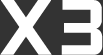
<style>
.page{position:relative;width:103px;height:55px;background:#333333}
.page>*{position:absolute;margin:0}
.t1{font:70px "HelloFont-WenYiHei";color:#ffffff;font-weight:bold}
</style>
<div class="page">
<p class="t1" style="left:0px;top:0px;width:103px;height:55px">X3</p>
</div>
